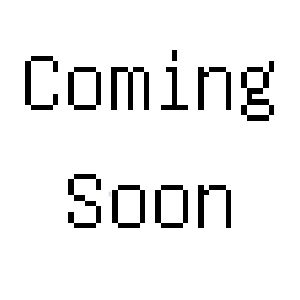
<style>
.page{position:relative;width:300px;height:300px;background:#ffffff}
.page>*{position:absolute;margin:0}
.t1{font:86.7px "GNUUnifontFull";color:#000000}
</style>
<div class="page">
<p class="t1" style="left:25px;top:50px;width:249px;height:71px">Coming</p>
<p class="t1" style="left:68px;top:174px;width:163px;height:54px">Soon</p>
</div>
